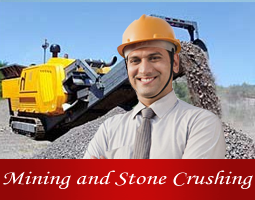
<style>
.page{position:relative;width:255px;height:200px}
.page>*{position:absolute;margin:0}
.t1{font:19.8px "MonotypeCorsiva";color:#ffffff;scale:1.3 1}
</style>
<div class="page">
<p class="t1" style="left:3px;top:170px;width:250px;height:19px">Mining and Stone Crushing</p>
</div>
